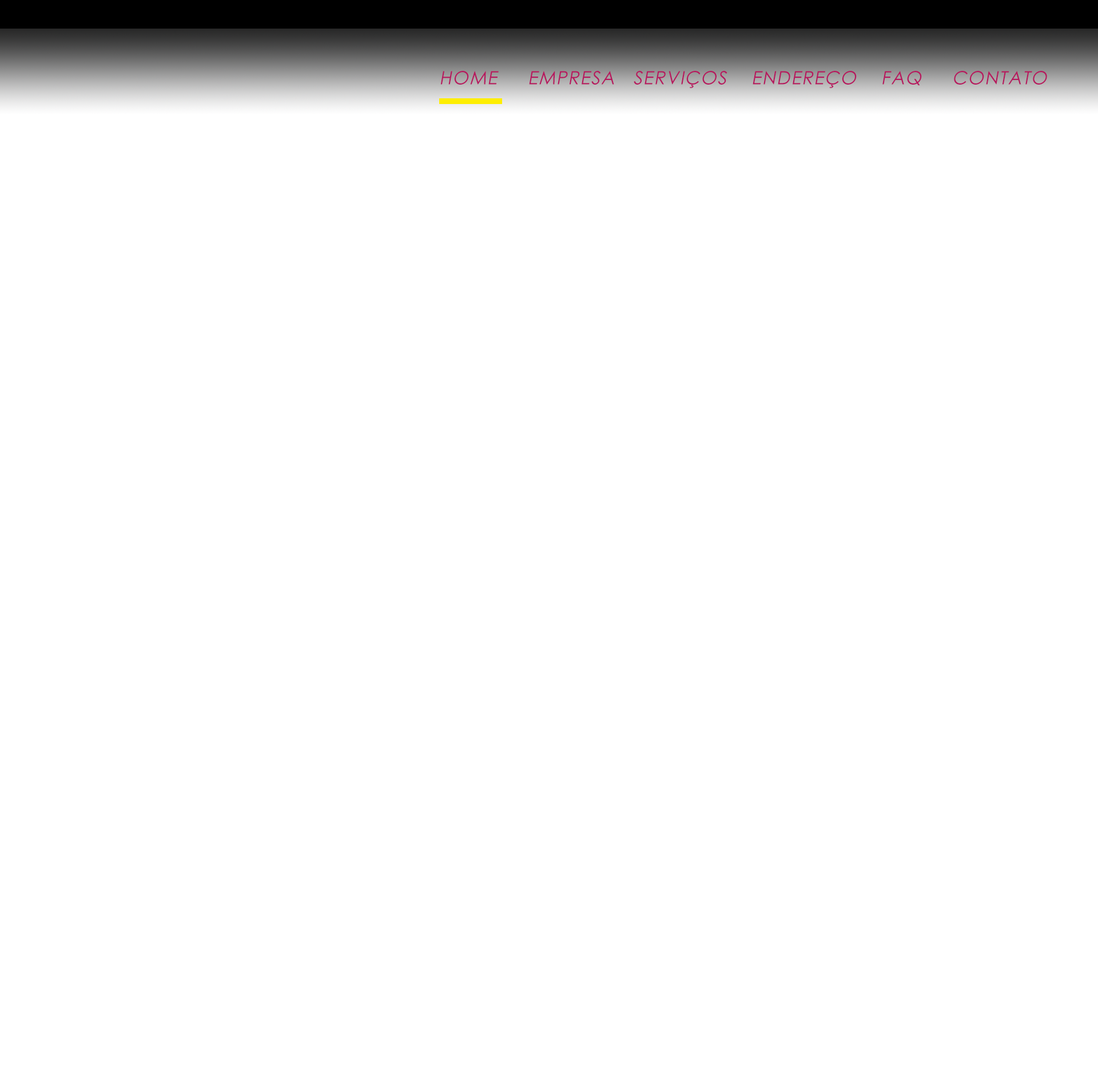
<style>
.page{position:relative;width:1098px;height:1086px;background:#ffffff}
.page>*{position:absolute;margin:0}
.t1{font:18.3px "CenturyGothic";letter-spacing:0.05em;color:#b6185e;text-transform:uppercase;font-style:italic}
</style>
<div class="page">
<p class="t1" style="left:440px;top:71px;width:607px;height:17px">HoME     EMPRESA   SERVIÇOS    ENDEREÇO    FAQ     CONTATO</p>
</div>
